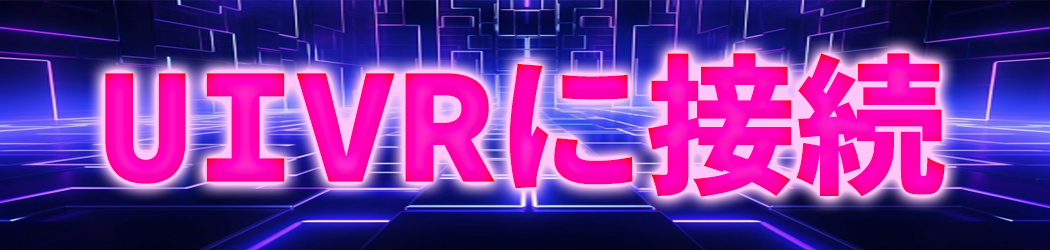
<style>
.page{position:relative;width:1050px;height:250px}
.page>*{position:absolute;margin:0}
.t1{font:150px "SourceHanCodeJP-Heavy"}
</style>
<div class="page">
<p class="t1" style="left:105px;top:53px;width:840px;height:144px">UIVRに接続</p>
</div>
